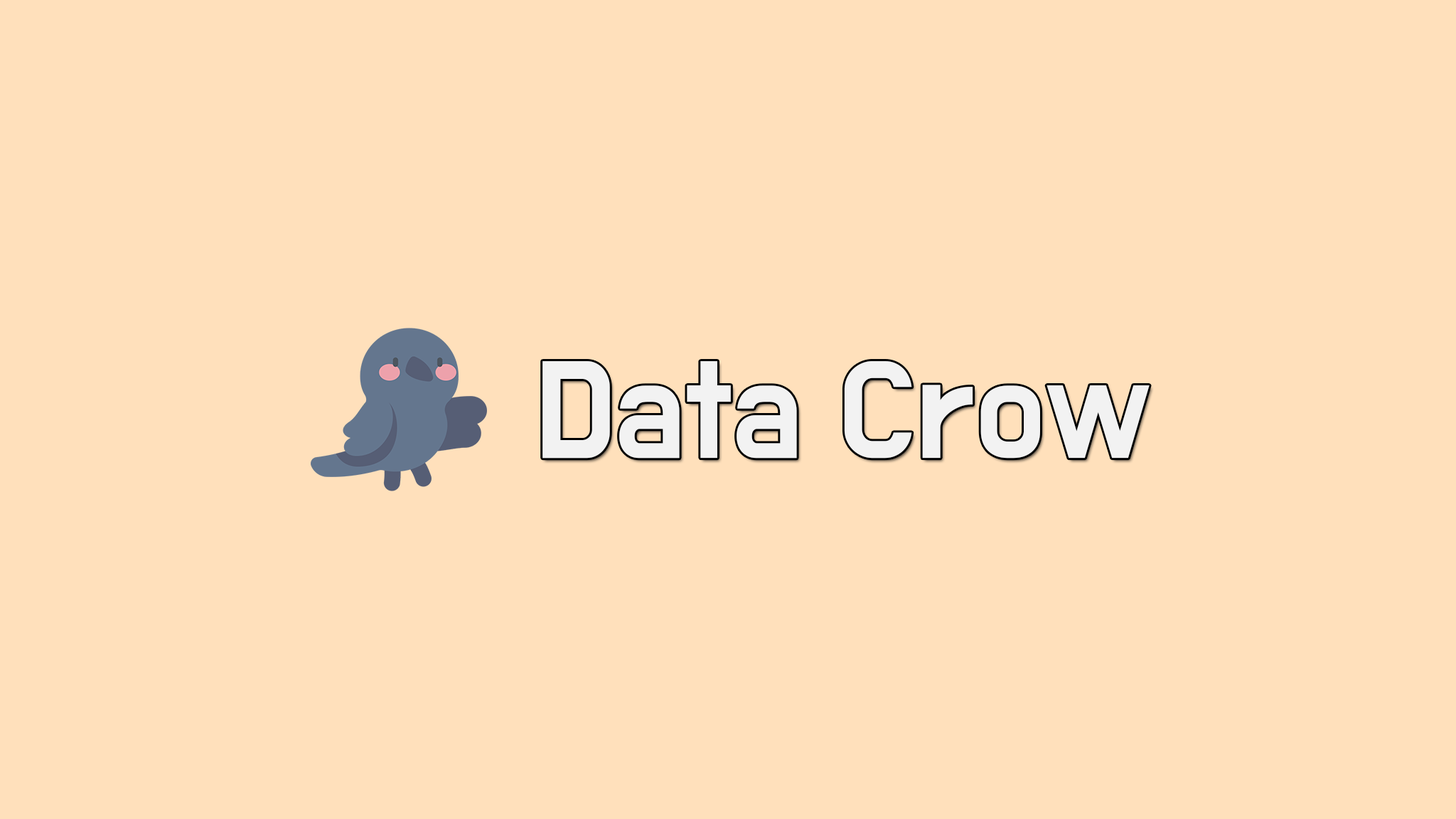
<style>
.page{position:relative;width:1456px;height:819px;background:#ffe0bb}
.page>*{position:absolute;margin:0}
.t1{font:113.7px "BMDoHyeon";color:#f2f2f2}
</style>
<div class="page">
<p class="t1" style="left:542px;top:361px;width:608px;height:98px">Data Crow</p>
</div>
